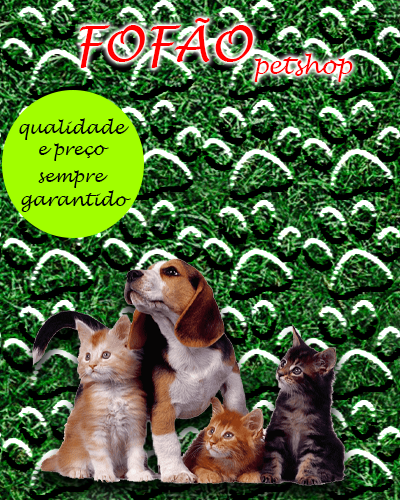
<style>
.page{position:relative;width:400px;height:500px}
.page>*{position:absolute;margin:0}
.t1{font:48px "LucidaHandwriting-Italic";color:#ff0000}
.t2{font:24px "LucidaHandwriting-Italic";color:#fe0000}
.t3{font:17.8px "LucidaHandwriting-Italic";color:#030303}
.t4{font:17.3px "LucidaHandwriting-Italic";color:#030303}
.t5{font:17.4px "LucidaHandwriting-Italic";color:#030303}
</style>
<div class="page">
<p class="t1" style="left:79px;top:18px;width:174px;height:50px">FOFÃO</p>
<p class="t2" style="left:254px;top:53px;width:99px;height:29px">petshop</p>
<p class="t3" style="left:19px;top:118px;width:110px;height:22px">qualidade</p>
<p class="t4" style="left:39px;top:143px;width:70px;height:18px">e preço</p>
<p class="t5" style="left:38px;top:170px;width:70px;height:18px">sempre</p>
<p class="t3" style="left:21px;top:190px;width:110px;height:22px">garantido</p>
</div>
